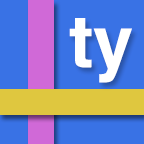
<style>
.page{position:relative;width:144px;height:144px;background:#3972e5}
.page>*{position:absolute;margin:0}
.t1{font:72px "Helvetica-Bold";color:#6c92e1}
</style>
<div class="page">
<p class="t1" style="left:69px;top:18px;width:63px;height:65px">ty</p>
</div>
